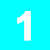
<style>
.page{position:relative;width:50px;height:50px;background:#00ffff}
.page>*{position:absolute;margin:0}
.t1{font:40px "Arial-BoldMT";color:#ffffff;font-weight:bold}
</style>
<div class="page">
<p class="t1" style="left:17px;top:11px;width:14px;height:30px">1</p>
</div>
